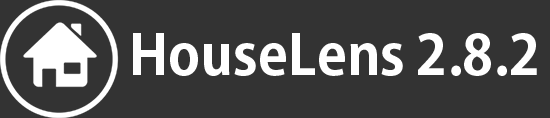
<style>
.page{position:relative;width:550px;height:118px;background:#333333}
.page>*{position:absolute;margin:0}
.t1{font:54.9px "AdobeGothicStd-Bold";color:#ffffff}
</style>
<div class="page">
<p class="t1" style="left:133px;top:33px;width:404px;height:43px">HouseLens 2.8.2</p>
</div>
